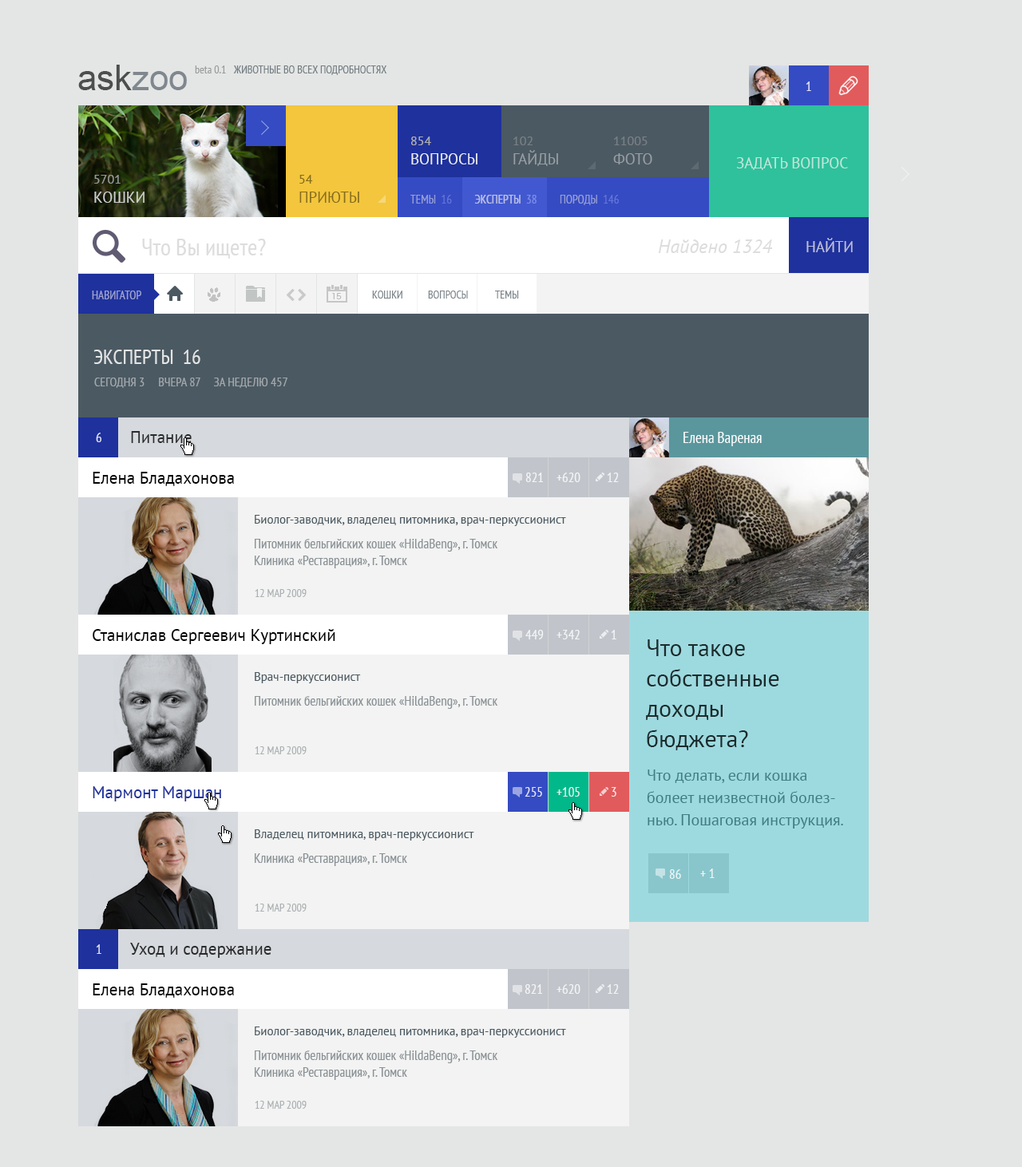
<style>
.page{position:relative;width:1022px;height:1167px;background:#e4e6e5}
.page>*{position:absolute;margin:0}
.t1{font:35.1px "ArialMT"}
.t2{font:11.2px "PTSans-Narrow";color:#9a9c9b}
.t3{font:11.2px "PTSans-Narrow";color:#737d82;text-transform:uppercase}
.t4{font:13.6px "PTSans-Narrow";color:#e1e3f4}
.t5{font:15.2px/19.2px "PTSans-Regular";color:#ebecee;text-transform:uppercase}
.t6{font:12.8px/19.2px "PTSans-Regular";color:#aeaeae;text-transform:uppercase}
.t7{font:15.2px/19.2px "PTSans-Regular";color:#989ea3;text-transform:uppercase}
.t8{font:12.8px/19.2px "PTSans-Regular";color:#989ea3;text-transform:uppercase}
.t9{font:12.8px/19.2px "PTSans-Regular";text-transform:uppercase}
.t10{font:15.2px/19.2px "PTSans-Regular";text-transform:uppercase}
.t11{font:15.2px "PTSans-Regular";color:#bee7db;text-transform:uppercase}
.t12{font:15.2px/19.2px "PTSans-Regular";color:#cdcecf;text-transform:uppercase}
.t13{font:12.8px/19.2px "PTSans-Regular";color:#cdcecf;text-transform:uppercase}
.t14{font:15.2px/19.2px "PTSans-Regular";color:#866c1d;text-transform:uppercase}
.t15{font:12.8px/19.2px "PTSans-Regular";color:#866c1d;text-transform:uppercase}
.t16{font:12px "PTSans-Narrow";text-transform:uppercase}
.t17{font:12px "PTSans-Narrow";color:#b6bbe4;text-transform:uppercase}
.t18{font:23.9px "PTSans-Narrow";color:#dddddd}
.t19{font:19.2px "PTSans-Italic";color:#dddddd}
.t20{font:15.2px "PTSans-Regular";color:#bcbfdb;text-transform:uppercase}
.t21{font:12px "PTSans-Narrow";color:#9ea3cd;text-transform:uppercase}
.t22{font:11.2px "PTSans-Narrow";color:#7b848a;text-transform:uppercase}
.t23{font:20.8px "PTSans-Narrow";color:#e3e4e5;text-transform:uppercase}
.t24{font:12.8px "PTSans-Narrow";color:#a2a8ac;text-transform:uppercase}
.t25{font:13.6px "PTSans-Narrow";color:#dfe0ed}
.t26{font:16.8px "PTSans-Regular";color:#2a2b2c}
.t27{font:16.8px "PTSans-Regular";color:#000000}
.t28{font:13.6px "PTSans-Narrow";color:#ffffff}
.t29{font:12px "PTSans-Regular";color:#4b5962}
.t30{font:13.6px/16.8px "PTSans-Narrow";color:#8a9196}
.t31{font:11.2px "PTSans-Narrow";color:#abb0b3;text-transform:uppercase}
.t32{font:13.6px "PTSans-Narrow";color:#8a9196}
.t33{font:16.8px "PTSans-Regular";color:#1e319d}
.t34{font:13.6px "PTSans-Narrow";color:#ddf2eb}
.t35{font:13.6px "PTSans-Narrow";color:#f9e4e5}
</style>
<div class="page">
<p class="t1" style="left:78px;top:65px;width:109px;height:25px">askzoo</p>
<p class="t2" style="left:195px;top:65px;width:31px;height:8px">beta 0.1</p>
<p class="t3" style="left:233px;top:65px;width:154px;height:10px">животные во всех подробностях</p>
<p class="t4" style="left:805px;top:81px;width:6px;height:10px">1</p>
<p class="t5" style="left:411px;top:137px;width:66px;height:27px"><span class="t6">854<br></span>вопросы</p>
<p class="t7" style="left:513px;top:137px;width:45px;height:29px"><span class="t8">102<br></span>гайды</p>
<p class="t9" style="left:613px;top:137px;width:39px;height:27px">11005<br><span class="t10">фото</span></p>
<p class="t11" style="left:736px;top:157px;width:112px;height:13px">задать вопрос</p>
<p class="t12" style="left:94px;top:175px;width:50px;height:28px"><span class="t13">5701<br></span>кошки</p>
<p class="t14" style="left:299px;top:175px;width:60px;height:28px"><span class="t15">54<br></span>приюты</p>
<p class="t16" style="left:410px;top:195px;width:209px;height:10px">темы  16         эксперты  38         породы  146</p>
<p class="t17" style="left:475px;top:195px;width:61px;height:9px">эксперты  38</p>
<p class="t18" style="left:142px;top:239px;width:124px;height:20px">Что Вы ищете?</p>
<p class="t19" style="left:658px;top:239px;width:115px;height:14px">Найдено 1324</p>
<p class="t20" style="left:806px;top:238px;width:47px;height:14px">Найти</p>
<p class="t21" style="left:92px;top:291px;width:49px;height:8px">навигатор</p>
<p class="t22" style="left:372px;top:291px;width:30px;height:8px">кошки</p>
<p class="t22" style="left:428px;top:291px;width:40px;height:8px">вопросы</p>
<p class="t22" style="left:495px;top:291px;width:24px;height:8px">темы</p>
<p class="t23" style="left:93px;top:350px;width:107px;height:14px">эксперты  16</p>
<p class="t24" style="left:94px;top:378px;width:193px;height:10px">сегодня 3     вчера 87     за неделю 457</p>
<p class="t25" style="left:96px;top:433px;width:5px;height:9px">6</p>
<p class="t26" style="left:131px;top:431px;width:61px;height:12px">Питание</p>
<p class="t27" style="left:93px;top:472px;width:141px;height:14px">Елена Бладахонова</p>
<p class="t28" style="left:525px;top:473px;width:18px;height:9px;opacity:0.8">821</p>
<p class="t28" style="left:556px;top:473px;width:24px;height:9px;opacity:0.8">+620</p>
<p class="t28" style="left:607px;top:473px;width:12px;height:9px;opacity:0.8">12</p>
<p class="t29" style="left:255px;top:515px;width:311px;height:11px">Биолог-заводчик, владелец питомника, врач-перкуссионист</p>
<p class="t30" style="left:255px;top:539px;width:243px;height:29px">Питомник бельгийских кошек «HildaBeng», г. Томск<br>Клиника «Реставрация», г. Томск</p>
<p class="t31" style="left:255px;top:589px;width:52px;height:8px">12 мар 2009</p>
<p class="t27" style="left:93px;top:629px;width:242px;height:15px">Станислав Сергеевич Куртинский</p>
<p class="t28" style="left:525px;top:630px;width:19px;height:9px;opacity:0.8">449</p>
<p class="t28" style="left:556px;top:630px;width:24px;height:9px;opacity:0.8">+342</p>
<p class="t28" style="left:611px;top:630px;width:5px;height:9px;opacity:0.8">1</p>
<p class="t29" style="left:255px;top:672px;width:106px;height:11px">Врач-перкуссионист</p>
<p class="t32" style="left:255px;top:696px;width:243px;height:13px">Питомник бельгийских кошек «HildaBeng», г. Томск</p>
<p class="t31" style="left:255px;top:746px;width:52px;height:8px">12 мар 2009</p>
<p class="t33" style="left:93px;top:786px;width:128px;height:15px">Мармонт Маршан</p>
<p class="t4" style="left:524px;top:787px;width:18px;height:10px">255</p>
<p class="t34" style="left:556px;top:787px;width:24px;height:10px">+105</p>
<p class="t35" style="left:611px;top:787px;width:5px;height:10px">3</p>
<p class="t29" style="left:255px;top:829px;width:219px;height:12px">Владелец питомника, врач-перкуссионист</p>
<p class="t32" style="left:255px;top:853px;width:152px;height:13px">Клиника «Реставрация», г. Томск</p>
<p class="t31" style="left:255px;top:904px;width:52px;height:8px">12 мар 2009</p>
<p class="t25" style="left:96px;top:944px;width:5px;height:10px">1</p>
<p class="t26" style="left:130px;top:943px;width:141px;height:15px">Уход и содержание</p>
<p class="t27" style="left:93px;top:983px;width:141px;height:15px">Елена Бладахонова</p>
<p class="t28" style="left:524px;top:984px;width:18px;height:10px;opacity:0.8">821</p>
<p class="t28" style="left:556px;top:984px;width:24px;height:10px;opacity:0.8">+620</p>
<p class="t28" style="left:607px;top:984px;width:12px;height:10px;opacity:0.8">12</p>
<p class="t29" style="left:255px;top:1027px;width:311px;height:11px">Биолог-заводчик, владелец питомника, врач-перкуссионист</p>
<p class="t30" style="left:255px;top:1050px;width:243px;height:30px">Питомник бельгийских кошек «HildaBeng», г. Томск<br>Клиника «Реставрация», г. Томск</p>
<p class="t31" style="left:255px;top:1101px;width:52px;height:8px">12 мар 2009</p>
</div>
